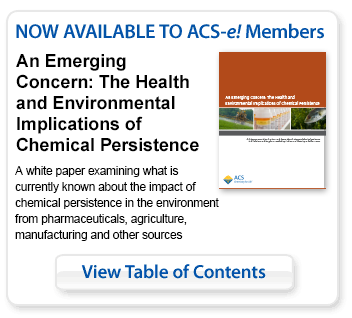
<style>
.page{position:relative;width:352px;height:318px;background:#ffffff}
.page>*{position:absolute;margin:0}
.t1{font:18px/21px "Arial-BoldMT";letter-spacing:-0.005em;color:#000000}
.t2{font:11.9px/16px "ArialMT";letter-spacing:-0.015em;color:#000000}
</style>
<div class="page">
<p class="t1" style="left:16px;top:54px;width:183px;height:98px">An Emerging Concern: The Health and Environmental Implications of Chemical Persistence</p>
<p class="t2" style="left:15px;top:166px;width:204px;height:75px">A white paper examining what is currently known about the impact of chemical persistence in the environment from pharmaceuticals, agriculture, manufacturing and other sources</p>
</div>
